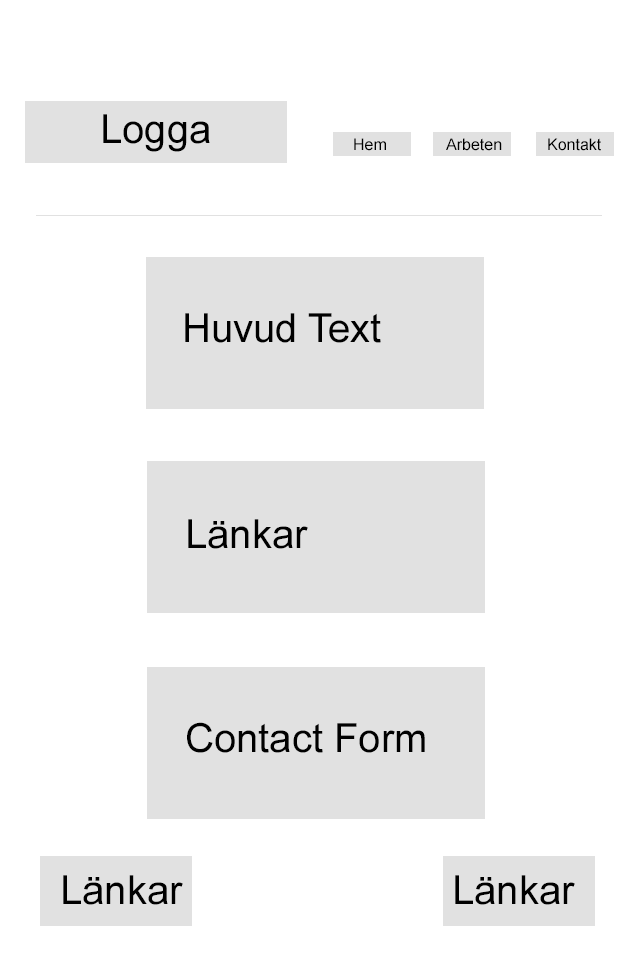
<style>
.page{position:relative;width:640px;height:960px;background:#ffffff}
.page>*{position:absolute;margin:0}
.t1{font:40px "ArialMT";color:#000000}
.t2{font:16px "ArialMT";color:#000000}
</style>
<div class="page">
<p class="t1" style="left:103px;top:114px;width:107px;height:38px">Logga</p>
<p class="t2" style="left:354px;top:138px;width:32px;height:13px">Hem</p>
<p class="t2" style="left:446px;top:138px;width:56px;height:13px">Arbeten</p>
<p class="t2" style="left:548px;top:138px;width:53px;height:13px">Kontakt</p>
<p class="t1" style="left:185px;top:313px;width:196px;height:30px">Huvud Text</p>
<p class="t1" style="left:188px;top:519px;width:120px;height:30px">Länkar</p>
<p class="t1" style="left:187px;top:722px;width:238px;height:31px">Contact Form</p>
<p class="t1" style="left:63px;top:875px;width:120px;height:30px">Länkar</p>
<p class="t1" style="left:455px;top:875px;width:120px;height:30px">Länkar</p>
</div>
